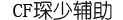
<style>
.page{position:relative;width:123px;height:20px;background:#ffffff}
.page>*{position:absolute;margin:0}
.t1{font:20px "YouYuan";color:#000000}
</style>
<div class="page">
<p class="t1" style="left:13px;top:0px;width:99px;height:21px">CF琛少辅助</p>
</div>
